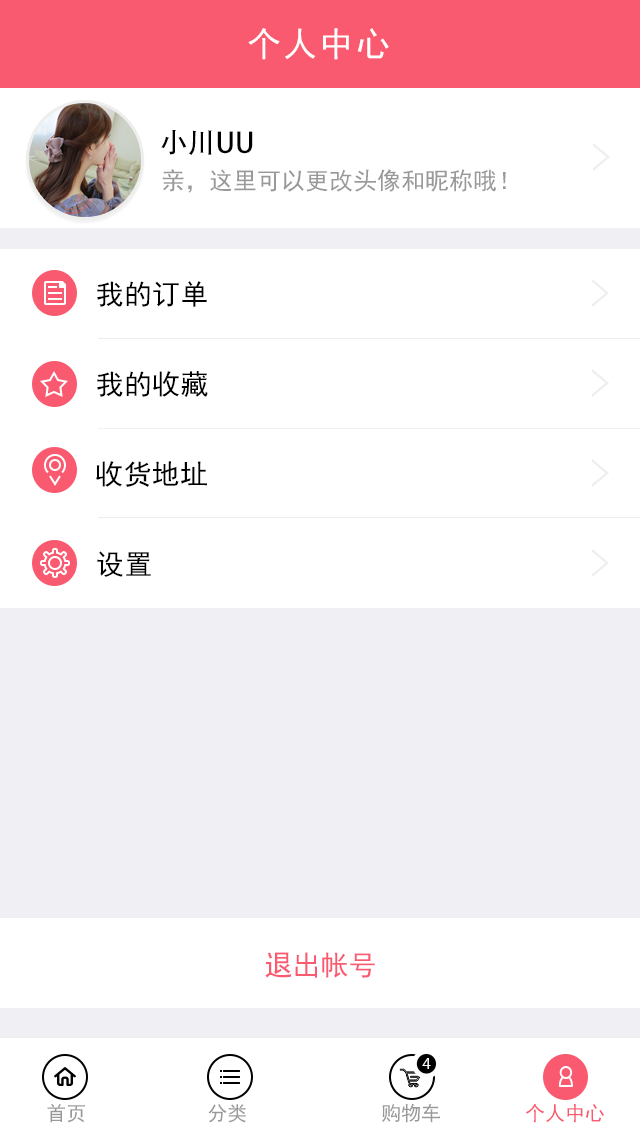
<style>
.page{position:relative;width:640px;height:1136px;background:#ffffff}
.page>*{position:absolute;margin:0}
.t1{font:34px "SimHei";letter-spacing:0.06em;color:#ffffff}
.t2{font:28px "AdobeHeitiStd-Regular";color:#000000}
.t3{font:24px "SimHei";color:#999999}
.t4{font:28px "SimHei";letter-spacing:0.01em;color:#000000}
.t5{font:28px "SimHei";color:#f95a70}
.t6{font:16.8px "MyriadPro-Regular";color:#f8f8f8}
.t7{font:20px "SimHei";color:#999999}
.t8{font:20px "SimHei";color:#f95a70}
</style>
<div class="page">
<p class="t1" style="left:248px;top:28px;width:141px;height:32px">个人中心</p>
<p class="t2" style="left:161px;top:130px;width:92px;height:25px">小川UU</p>
<p class="t3" style="left:162px;top:169px;width:344px;height:24px">亲，这里可以更改头像和昵称哦！</p>
<p class="t4" style="left:97px;top:281px;width:110px;height:26px">我的订单</p>
<p class="t4" style="left:97px;top:371px;width:111px;height:26px">我的收藏</p>
<p class="t4" style="left:96px;top:461px;width:111px;height:26px">收货地址</p>
<p class="t4" style="left:97px;top:551px;width:54px;height:26px">设置</p>
<p class="t5" style="left:265px;top:952px;width:110px;height:26px">退出帐号</p>
<p class="t6" style="left:422px;top:1058px;width:9px;height:11px">4</p>
<p class="t7" style="left:47px;top:1104px;width:38px;height:19px">首页</p>
<p class="t7" style="left:208px;top:1104px;width:38px;height:19px">分类</p>
<p class="t7" style="left:382px;top:1103px;width:58px;height:20px">购物车</p>
<p class="t8" style="left:525px;top:1103px;width:79px;height:20px">个人中心</p>
</div>
